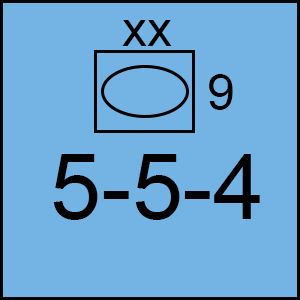
<style>
.page{position:relative;width:300px;height:300px;background:#74b4e4}
.page>*{position:absolute;margin:0}
.t1{font:50px "ArialMT";color:#000000}
.t2{font:91.7px "ArialMT";color:#000000}
</style>
<div class="page">
<p class="t1" style="left:122px;top:20px;width:50px;height:26px">xx</p>
<p class="t1" style="left:209px;top:74px;width:24px;height:36px">9</p>
<p class="t2" style="left:53px;top:154px;width:207px;height:66px">5-5-4</p>
</div>
